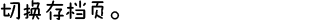
<style>
.page{position:relative;width:327px;height:20px;background:#ffffff}
.page>*{position:absolute;margin:0}
.t1{font:24px "¢è?";color:#000000}
</style>
<div class="page">
<p class="t1" style="left:0px;top:0px;width:120px;height:20px">切换存档页。</p>
</div>
